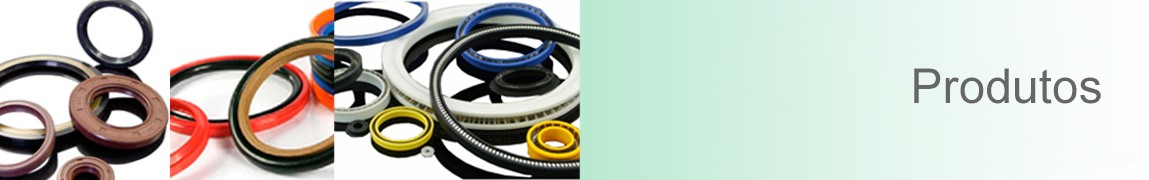
<style>
.page{position:relative;width:1149px;height:180px}
.page>*{position:absolute;margin:0}
.t1{font:48px "ArialMT";color:#666666}
</style>
<div class="page">
<p class="t1" style="left:914px;top:68px;width:187px;height:36px">Produtos</p>
</div>
